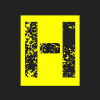
<style>
.page{position:relative;width:100px;height:100px;background:#222222}
.page>*{position:absolute;margin:0}
.t1{font:80px "Captureit2";color:#ffff00}
</style>
<div class="page">
<p class="t1" style="left:20px;top:15px;width:60px;height:71px">H</p>
</div>
